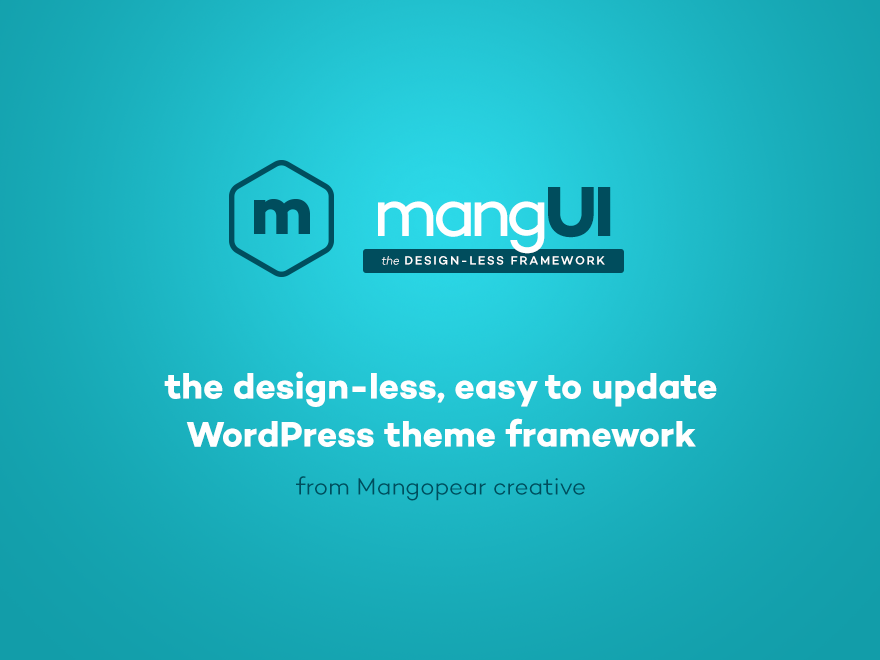
<style>
.page{position:relative;width:880px;height:660px}
.page>*{position:absolute;margin:0}
.t1{font:72px "Campton-Book";letter-spacing:-0.075em;color:#ffffff}
.t2{font:72px "Campton-Book";letter-spacing:-0.1em;color:#ffffff}
.t3{font:72px "Campton-Bold";letter-spacing:-0.05em;color:#004d5d}
.t4{font:12px "Campton-Medium";letter-spacing:0.14em;color:#ffffff}
.t5{font:12px "Campton-LightItalic";letter-spacing:-0.025em;color:#ffffff}
.t6{font:36px/48px "Campton-Bold";color:#ffffff}
.t7{font:36px/48px "Campton-Light";color:#ffffff}
.t8{font:24px/48px "Campton-Light";color:#004d5d}
</style>
<div class="page">
<p class="t1" style="left:378px;top:187px;width:233px;height:67px">m<span class="t2">a</span>ng<span class="t3">UI</span></p>
<p class="t4" style="left:381px;top:256px;width:224px;height:9px"><span class="t5">the</span> DESIGN-LESS FRAMEWORK</p>
<p class="t6" style="left:164px;top:371px;width:553px;height:130px;text-align:center">the design-less, easy to update WordPress theme framework<span class="t7"> <br></span><span class="t8">from Mangopear creative</span></p>
</div>
